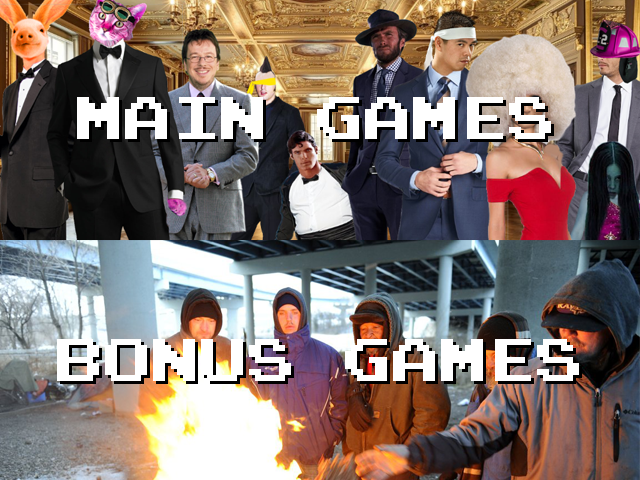
<style>
.page{position:relative;width:640px;height:480px}
.page>*{position:absolute;margin:0}
.t1{font:48px "PressStartReg";color:#ffffff}
</style>
<div class="page">
<p class="t1" style="left:77px;top:97px;width:474px;height:42px">MAIN GAMES</p>
<p class="t1" style="left:57px;top:339px;width:522px;height:42px">BONUS GAMES</p>
</div>
